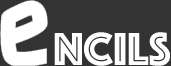
<style>
.page{position:relative;width:171px;height:66px;background:#333333}
.page>*{position:absolute;margin:0}
.t1{font:48px "Phosphate-Inline";color:#ffffff}
</style>
<div class="page">
<p class="t1" style="left:54px;top:32px;width:116px;height:34px">NCILS</p>
</div>
